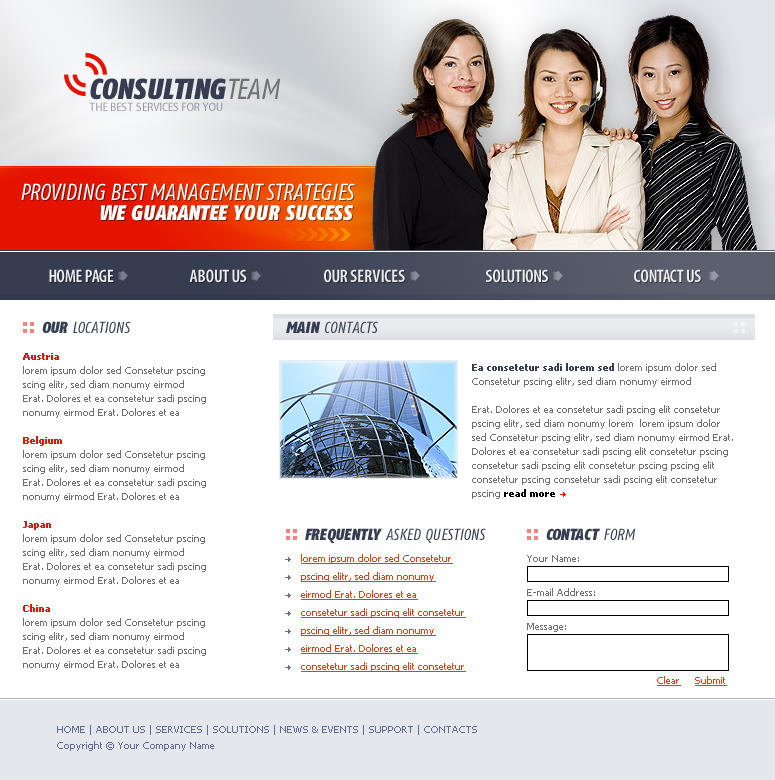
<style>
.page{position:relative;width:775px;height:780px;background:#ffffff}
.page>*{position:absolute;margin:0}
.t1{font:29px "FagoCo-BlackItalic";letter-spacing:0.01em;color:#363d50}
.t2{font:29px "FagoCo-Italic";letter-spacing:0.01em;color:#717171}
.t3{font:12px "MyriadPro-SemiCn";letter-spacing:0.01em;color:#9498a3}
.t4{font:23px "FagoCo-Italic";letter-spacing:-0.01em;color:#ffffff}
.t5{font:21px "FagoCo-BlackItalic";letter-spacing:0.01em;color:#ffffff}
.t6{font:18px "MyriadPro-SemiboldCond";letter-spacing:-0.01em;color:#eaeced}
.t7{font:16px "FagoCo-Italic";letter-spacing:0.01em;color:#363d50}
.t8{font:16px "FagoCo-BlackItalic";letter-spacing:0.01em;color:#363d50}
.t9{font:10px/14px "Tahoma";color:#6f6f6f}
.t10{font:10px/14px "Tahoma-Bold";color:#e41300}
.t11{font:10px/14px "Tahoma-Bold";color:#363d50}
.t12{font:10px/14px "Tahoma-Bold";color:#000000}
.t13{font:10px/18px "Tahoma";color:#ed3c00;text-decoration:underline}
.t14{font:10px "Tahoma";color:#6f6f6f}
.t15{font:10px "Tahoma";color:#ed3c00;text-decoration:underline}
.t16{font:10px/16px "Tahoma";color:#5e6998}
</style>
<div class="page">
<p class="t1" style="left:90px;top:78px;width:191px;height:22px">CONSULTING<span class="t2">TEAM</span></p>
<p class="t3" style="left:89px;top:102px;width:134px;height:9px">THE BEST SERVICES FOR YOU</p>
<p class="t4" style="left:21px;top:183px;width:334px;height:17px">PROVIDING BEST MANAGEMENT STRATEGIES</p>
<p class="t5" style="left:100px;top:205px;width:253px;height:16px">WE GUARANTEE YOUR SUCCESS</p>
<p class="t6" style="left:49px;top:269px;width:65px;height:14px">HOME PAGE</p>
<p class="t6" style="left:189px;top:269px;width:58px;height:14px">ABOUT US</p>
<p class="t6" style="left:324px;top:269px;width:81px;height:14px">OUR SERVICES</p>
<p class="t6" style="left:485px;top:269px;width:63px;height:14px">SOLUTIONS</p>
<p class="t6" style="left:634px;top:269px;width:67px;height:14px">CONTACT US</p>
<p class="t7" style="left:42px;top:321px;width:89px;height:12px"><span class="t8">OUR </span>LOCATIONS</p>
<p class="t7" style="left:286px;top:321px;width:92px;height:12px"><span class="t8">MAIN </span>CONTACTS</p>
<p class="t9" style="left:23px;top:353px;width:183px;height:317px"><span class="t10">Austria<br></span>lorem ipsum dolor sed Consetetur pscing<br>scing elitr, sed diam nonumy eirmod Erat. Dolores et ea consetetur sadi pscing nonumy eirmod Erat. Dolores et ea <br><br><span class="t10">Belgium<br></span>lorem ipsum dolor sed Consetetur pscing<br>scing elitr, sed diam nonumy eirmod Erat. Dolores et ea consetetur sadi pscing nonumy eirmod Erat. Dolores et ea <br><br><span class="t10">Japan<br></span>lorem ipsum dolor sed Consetetur pscing<br>scing elitr, sed diam nonumy eirmod Erat. Dolores et ea consetetur sadi pscing nonumy eirmod Erat. Dolores et ea <br><br><span class="t10">China<br></span>lorem ipsum dolor sed Consetetur pscing<br>scing elitr, sed diam nonumy eirmod Erat. Dolores et ea consetetur sadi pscing nonumy eirmod Erat. Dolores et ea</p>
<p class="t9" style="left:472px;top:363px;width:261px;height:136px"><span class="t11">Ea consetetur sadi lorem sed </span>lorem ipsum dolor sed Consetetur pscing elitr, sed diam nonumy eirmod <br><br>Erat. Dolores et ea consetetur sadi pscing elit consetetur pscing elitr, sed diam nonumy lorem  lorem ipsum dolor sed Consetetur pscing elitr, sed diam nonumy eirmod Erat. Dolores et ea consetetur sadi pscing elit consetetur pscing consetetur sadi pscing elit consetetur pscing pscing elit consetetur pscing consetetur sadi pscing elit consetetur pscing <span class="t12">read more</span></p>
<p class="t7" style="left:305px;top:528px;width:181px;height:15px"><span class="t8">FREQUENTLY </span>ASKED QUESTIONS</p>
<p class="t8" style="left:546px;top:528px;width:89px;height:12px">CONTACT <span class="t7">FORM</span></p>
<p class="t13" style="left:301px;top:554px;width:165px;height:118px">lorem ipsum dolor sed Consetetur pscing elitr, sed diam nonumy eirmod Erat. Dolores et ea consetetur sadi pscing elit consetetur<br>pscing elitr, sed diam nonumy eirmod Erat. Dolores et ea consetetur sadi pscing elit consetetur</p>
<p class="t14" style="left:527px;top:555px;width:52px;height:7px">Your Name:</p>
<p class="t14" style="left:527px;top:588px;width:68px;height:8px">E-mail Address:</p>
<p class="t14" style="left:527px;top:623px;width:39px;height:9px">Message:</p>
<p class="t15" style="left:657px;top:676px;width:24px;height:10px">Clear</p>
<p class="t15" style="left:695px;top:676px;width:32px;height:10px">Submit</p>
<p class="t16" style="left:57px;top:725px;width:420px;height:26px">HOME | ABOUT US | SERVICES | SOLUTIONS | NEWS &amp; EVENTS | SUPPORT | CONTACTS<br>Copyright © Your Company Name</p>
</div>
